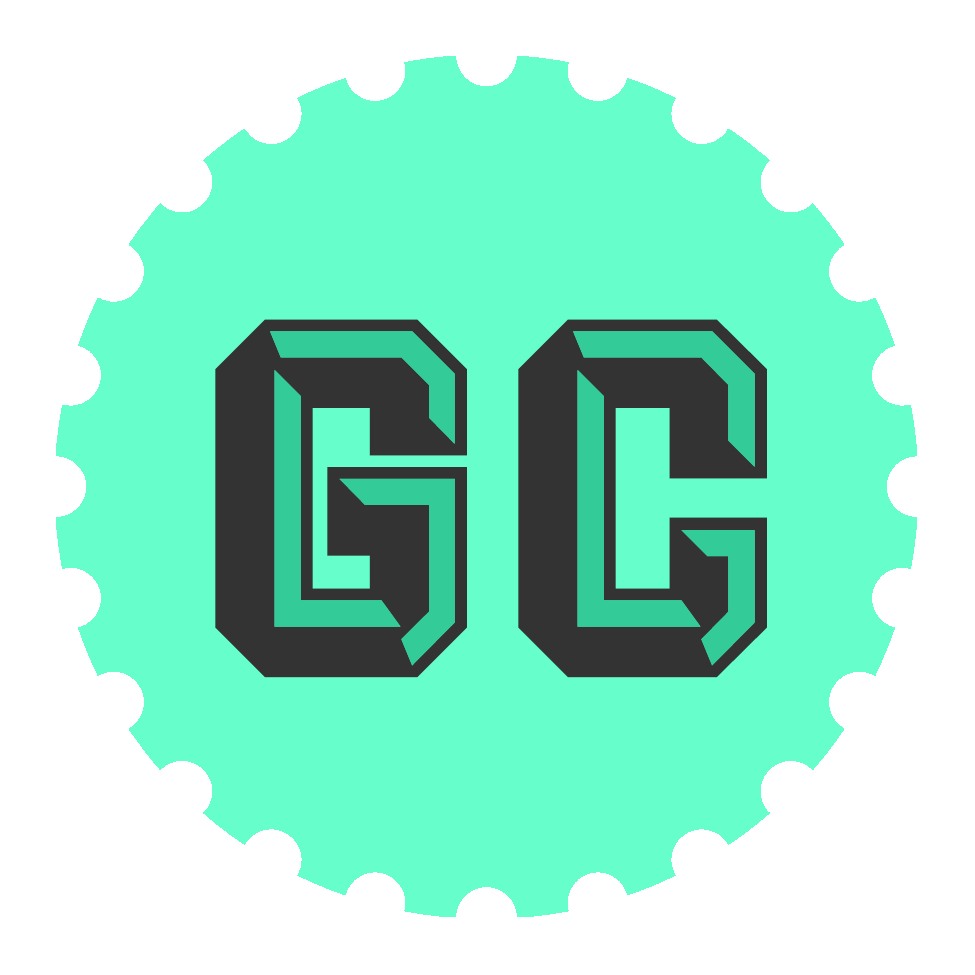
<style>
.page{position:relative;width:975px;height:975px;background:#ffffff}
.page>*{position:absolute;margin:0}
.t1{font:510.7px "PowerStationBlock";letter-spacing:0.025em;color:#333333;text-transform:uppercase}
.t2{font:510.7px "PowerStationBlockHigh";letter-spacing:0.025em;color:#33cc99;text-transform:uppercase}
</style>
<div class="page">
<p class="t1" style="left:215px;top:319px;width:552px;height:359px">GC</p>
<p class="t2" style="left:270px;top:331px;width:485px;height:335px">GC</p>
</div>
